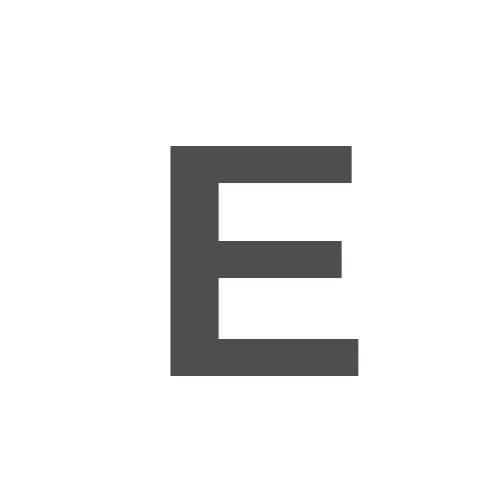
<style>
.page{position:relative;width:500px;height:500px;background:#ffffff}
.page>*{position:absolute;margin:0}
.t1{font:334.7px "LiberationSans-Bold";color:#4f4d4d}
</style>
<div class="page">
<p class="t1" style="left:170px;top:146px;width:189px;height:230px">E</p>
</div>
